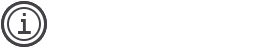
<style>
.page{position:relative;width:258px;height:48px;background:#ffffff}
.page>*{position:absolute;margin:0}
.t1{font:33.3px "Ticketing";color:#434145}
</style>
<div class="page">
<p class="t1" style="left:18px;top:13px;width:13px;height:21px">i</p>
</div>
